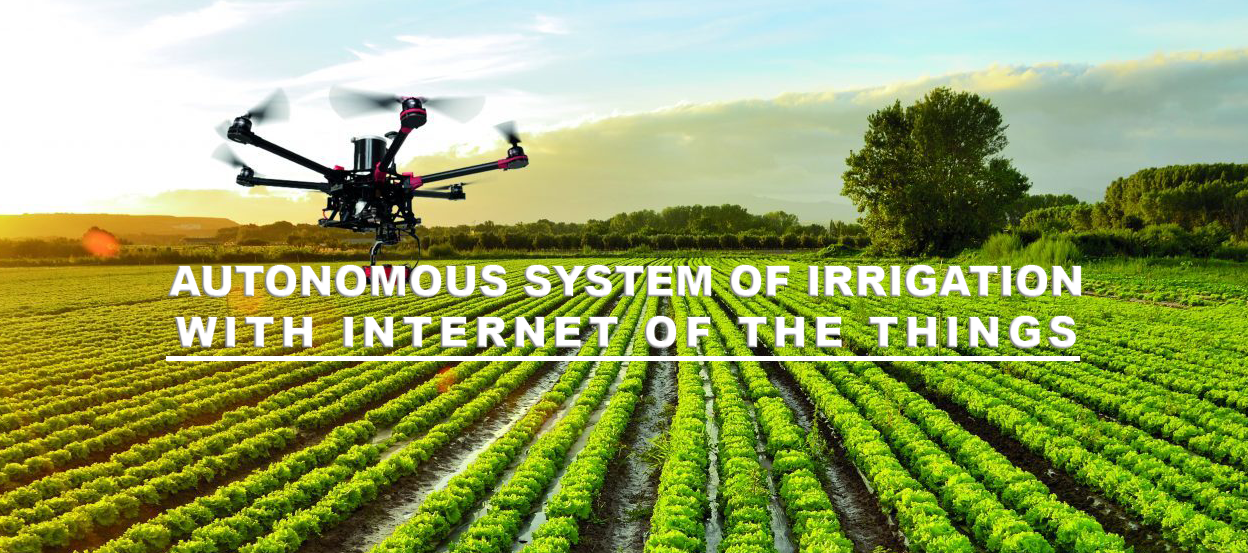
<style>
.page{position:relative;width:1248px;height:553px}
.page>*{position:absolute;margin:0}
.t1{font:42px "Arial-Black";color:#ffffff}
.t2{font:42px "Arial-Black";letter-spacing:0.13em;color:#ffffff}
</style>
<div class="page">
<p class="t1" style="left:168px;top:265px;width:913px;height:32px">AUTONOMOUS SYSTEM OF IRRIGATION</p>
<p class="t2" style="left:175px;top:316px;width:901px;height:32px">WITH INTERNET OF THE THINGS</p>
</div>
